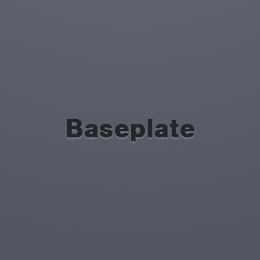
<style>
.page{position:relative;width:260px;height:260px}
.page>*{position:absolute;margin:0}
.t1{font:25.2px "NHaasGroteskDSPro-75Bd";letter-spacing:0.04em;color:#24252b;font-weight:bold}
</style>
<div class="page">
<p class="t1" style="left:66px;top:119px;width:129px;height:23px">Baseplate</p>
</div>
